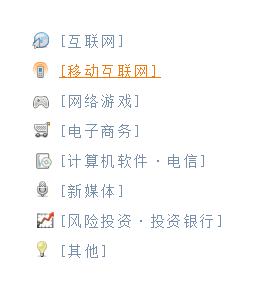
<style>
.page{position:relative;width:262px;height:291px;background:#ffffff}
.page>*{position:absolute;margin:0}
.t1{font:14px/30px "SimSun";letter-spacing:0.175em;color:#778fa9}
.t2{font:14px "SimSun";letter-spacing:0.175em;color:#ef7a0d;text-decoration:underline}
.t3{font:14px "SimSun";letter-spacing:0.175em;color:#778fa9}
</style>
<div class="page">
<p class="t1" style="left:62px;top:34px;width:159px;height:224px">[互联网]<br>[移动互联网]  <br>[网络游戏]    <br>[电子商务] <br>[计算机软件·电信]<br>[新媒体] <br>[风险投资·投资银行]<br>[其他]</p>
<p class="t2" style="left:59px;top:64px;width:102px;height:14px"><span class="t3"><br></span>[移动互联网]</p>
</div>
